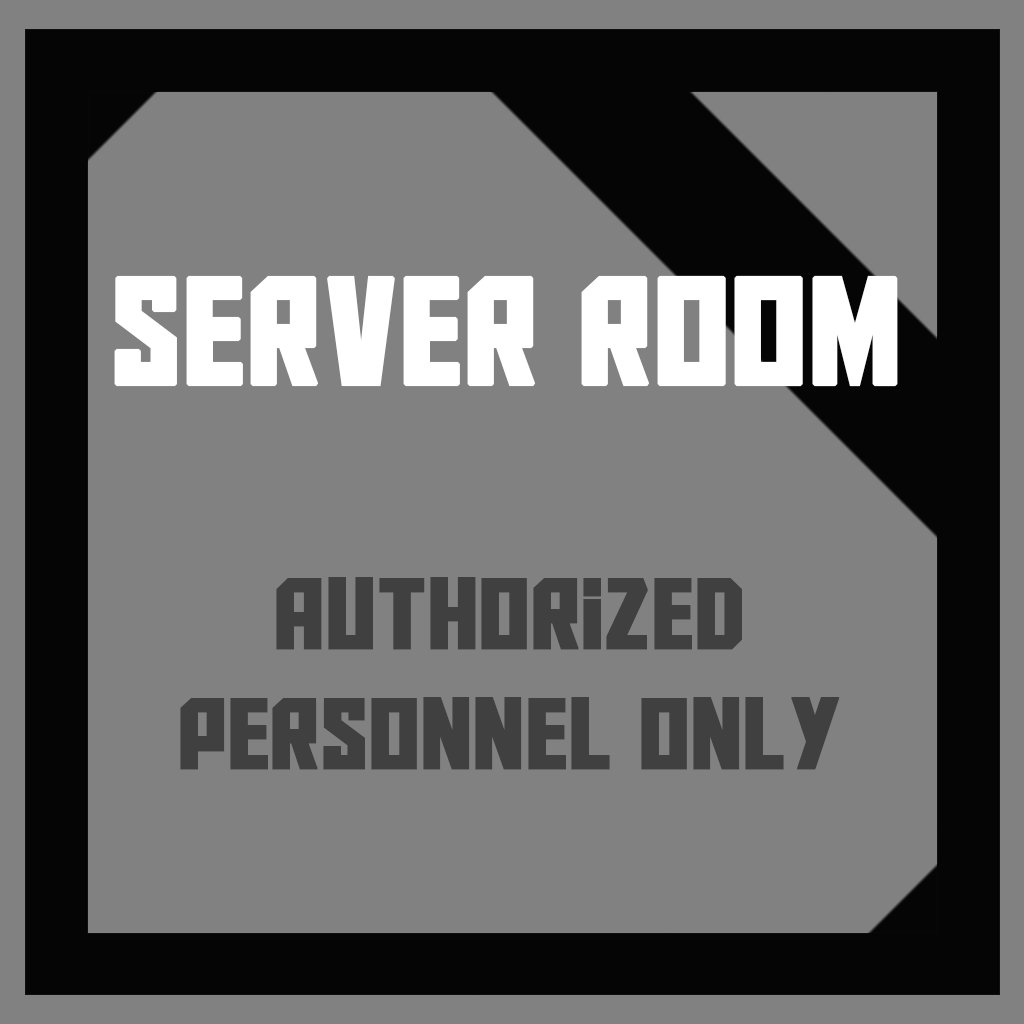
<style>
.page{position:relative;width:1024px;height:1024px;background:#818181}
.page>*{position:absolute;margin:0}
.t1{font:150px "AldotheApache";color:#ffffff;font-weight:bold}
.t2{font:100px "AldotheApache";color:#404040;font-weight:bold}
</style>
<div class="page">
<p class="t1" style="left:114px;top:275px;width:784px;height:112px">Server room</p>
<p class="t2" style="left:180px;top:577px;width:660px;height:193px;text-align:center">Authorized<br>personnel only</p>
</div>
